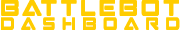
<style>
.page{position:relative;width:180px;height:30px;background:#ffffff}
.page>*{position:absolute;margin:0}
.t1{font:24px/14px "StrikeFighter";color:#ffcc00}
.t2{font:18px/14px "StrikeFighter";color:#ffcc00}
</style>
<div class="page">
<p class="t1" style="left:1px;top:0px;width:179px;height:30px;text-align:justify">Battlebot<br><span class="t2">Dashboard</span></p>
<p class="t1" style="left:1px;top:0px;width:179px;height:29px;text-align:justify">Battlebot<br><span class="t2">Dashboard</span></p>
</div>
